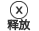
<style>
.page{position:relative;width:39px;height:31px;background:#ffffff}
.page>*{position:absolute;margin:0}
.t1{font:11px "MicrosoftYaHei";letter-spacing:0.01em;color:#333333;font-weight:bold}
</style>
<div class="page">
<p class="t1" style="left:7px;top:19px;width:24px;height:12px">释放</p>
</div>
